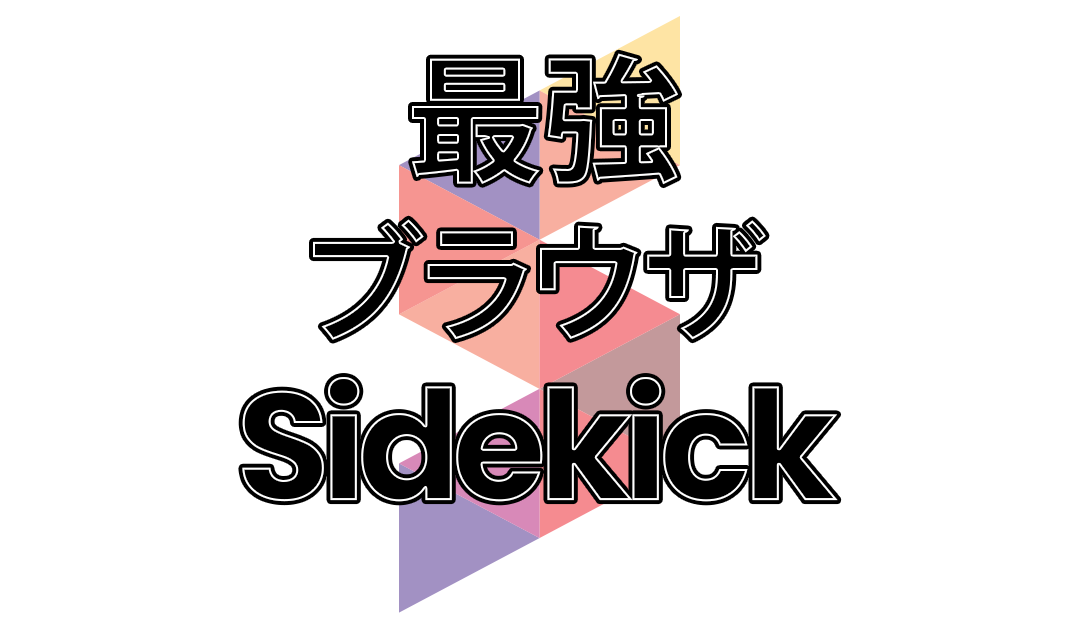
<style>
.page{position:relative;width:1080px;height:628px;background:#ffffff}
.page>*{position:absolute;margin:0}
.t1{font:127px "KozGoPr6N-Bold";color:#000000}
.t2{font:153.5px "Poppins-Bold";letter-spacing:-0.06em;color:#000000}
</style>
<div class="page">
<p class="t1" style="left:313px;top:219px;width:453px;height:121px">ブラウザ</p>
<p class="t2" style="left:242px;top:377px;width:596px;height:125px">Sidekick</p>
</div>
